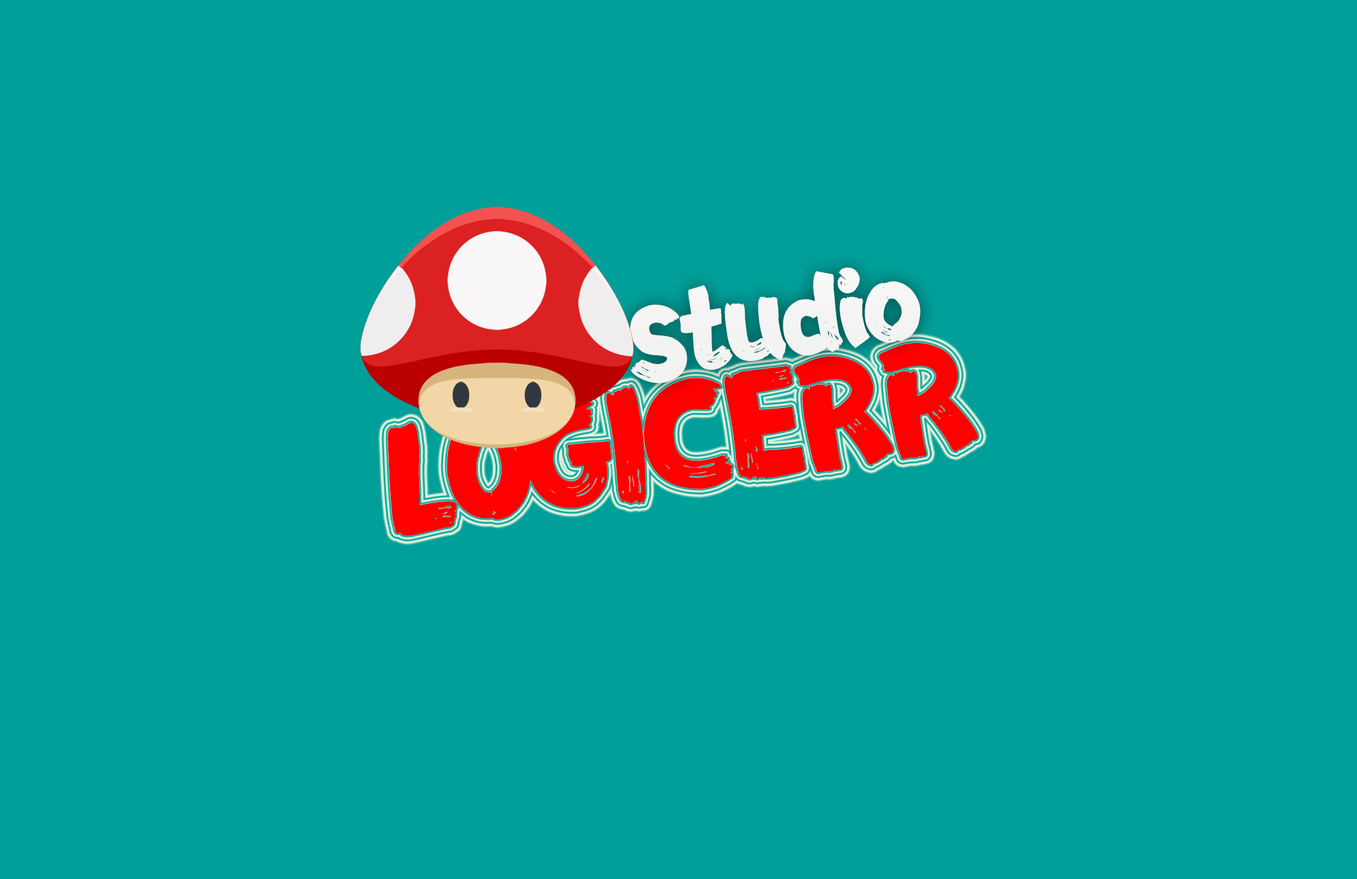
<style>
.page{position:relative;width:1357px;height:879px;background:#019f99}
.page>*{position:absolute;margin:0}
.t1{font:96.5px "FZFENSTXJW--GB1-0";letter-spacing:-0.08em;color:#ffffff}
.t2{font:136.7px "FZFENSTXJW--GB1-0";letter-spacing:-0.08em;color:#ff0000}
</style>
<div class="page">
<p class="t1" style="left:630px;top:267px;width:290px;height:117px;rotate:-9deg">Studio</p>
<p class="t2" style="left:387px;top:342px;width:590px;height:194px;rotate:-9deg">LOGICERR</p>
</div>
